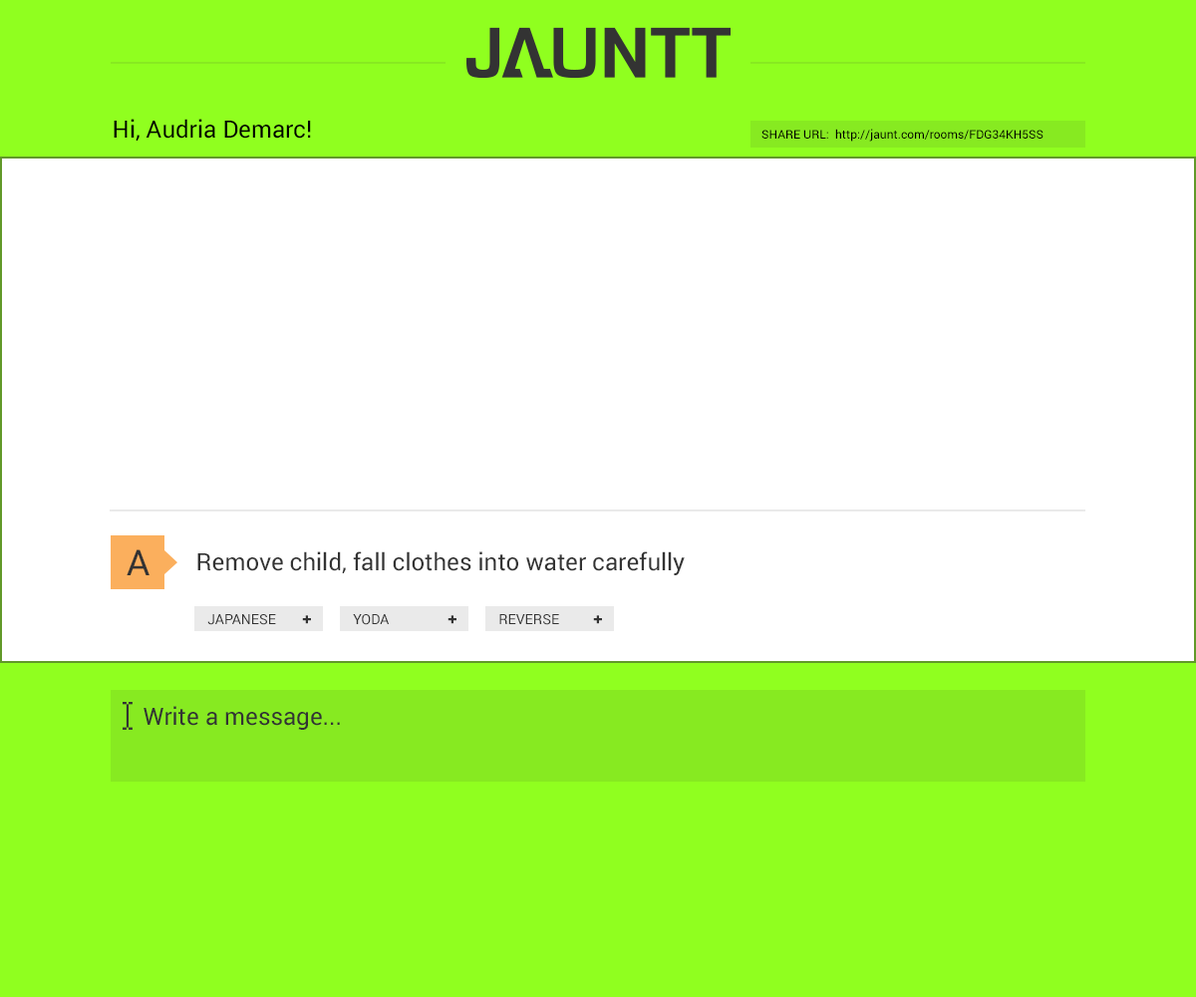
<style>
.page{position:relative;width:1196px;height:997px;background:#ffffff}
.page>*{position:absolute;margin:0}
.t1{font:23.9px "Roboto-Regular";letter-spacing:0.002em;color:#000000}
.t2{font:12px "Roboto-Regular";letter-spacing:0.002em;color:#000000;text-transform:uppercase}
.t3{font:12px "Roboto-Regular";letter-spacing:0.002em;color:#000000}
.t4{font:35.9px "Roboto-Regular";letter-spacing:0.002em;color:#333333}
.t5{font:23.9px "Roboto-Regular";letter-spacing:0.002em;color:#333333}
.t6{font:14px "Roboto-Regular";letter-spacing:0.002em;color:#333333;text-transform:uppercase}
.t7{font:15.9px "ModernPictograms-Pro";letter-spacing:0.002em;color:#333333;text-transform:uppercase}
</style>
<div class="page">
<p class="t1" style="left:114px;top:119px;width:197px;height:22px">Hi, Audria Demarc!</p>
<p class="t2" style="left:762px;top:130px;width:66px;height:9px">Share URL:</p>
<p class="t3" style="left:835px;top:129px;width:209px;height:13px">http://jaunt.com/rooms/FDG34KH5SS</p>
<p class="t4" style="left:127px;top:549px;width:23px;height:26px">A</p>
<p class="t5" style="left:197px;top:551px;width:488px;height:24px">Remove child, fall clothes into water carefully</p>
<p class="t6" style="left:207px;top:614px;width:69px;height:11px">Japanese</p>
<p class="t7" style="left:302px;top:615px;width:9px;height:9px">+</p>
<p class="t6" style="left:353px;top:614px;width:37px;height:11px">Yoda</p>
<p class="t7" style="left:448px;top:615px;width:9px;height:9px">+</p>
<p class="t6" style="left:499px;top:614px;width:60px;height:11px">Reverse</p>
<p class="t7" style="left:593px;top:615px;width:9px;height:9px">+</p>
<p class="t5" style="left:144px;top:706px;width:196px;height:24px">Write a message...</p>
</div>
